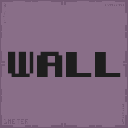
<style>
.page{position:relative;width:128px;height:128px;background:#896e88}
.page>*{position:absolute;margin:0}
.t1{font:37px "KemcoPixelBold";color:#1e1e1e}
</style>
<div class="page">
<p class="t1" style="left:8px;top:51px;width:113px;height:26px">Wall</p>
</div>
